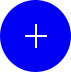
<style>
.page{position:relative;width:71px;height:72px;background:#0000f5}
.page>*{position:absolute;margin:0}
.t1{font:48px "CourierNewPSMT";letter-spacing:-0.02em;color:#ffffff;scale:0.96 1}
</style>
<div class="page">
<p class="t1" style="left:25px;top:24px;width:22px;height:24px">+</p>
</div>
